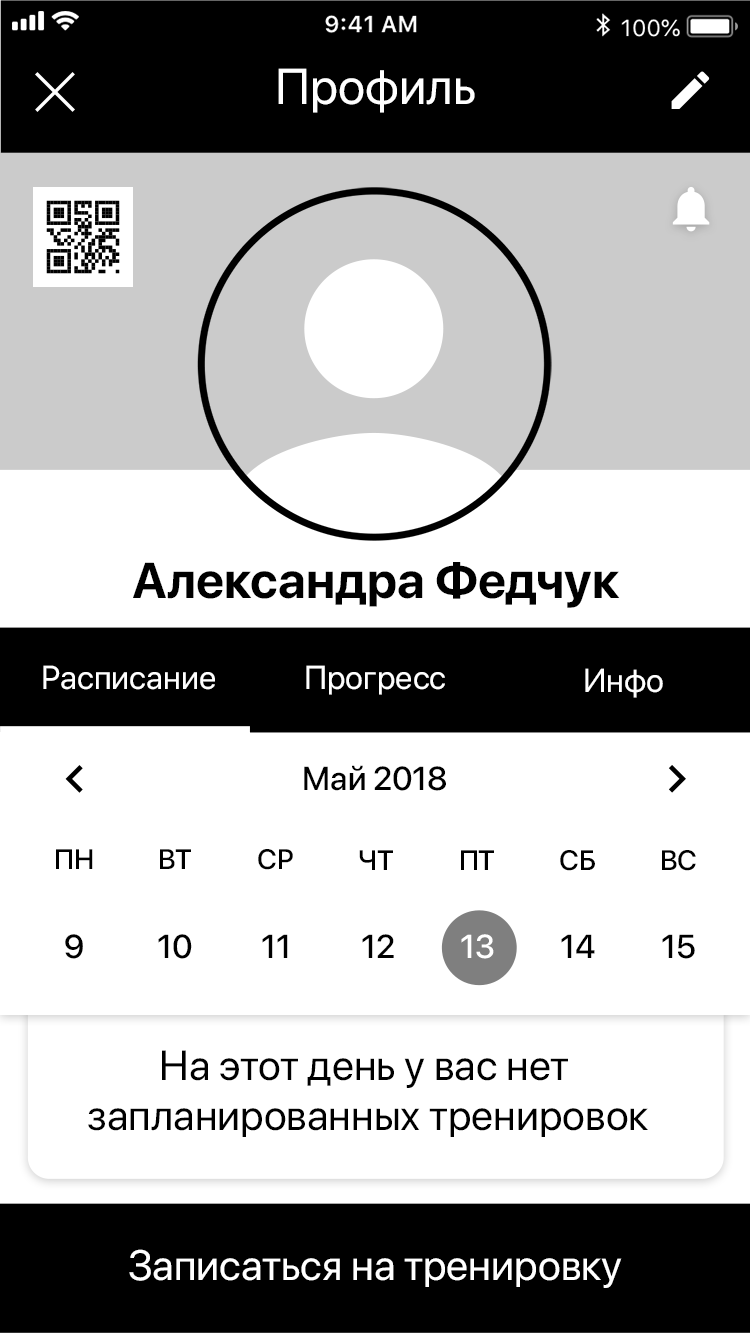
<style>
.page{position:relative;width:750px;height:1333px;background:#ffffff}
.page>*{position:absolute;margin:0}
.t1{font:50px "SFProDisplay-Regular";color:#ffffff}
.t2{font:50px "SFProDisplay-Bold";color:#000000}
.t3{font:33px "SFProDisplay-Regular";color:#ffffff}
.t4{font:33px "SFProDisplay-Medium";color:#000000}
.t5{font:28px "SFProDisplay-Medium";color:#000000}
.t6{font:33px "SFProDisplay-Medium";color:#ffffff}
.t7{font:42px "SFProDisplay-Regular";color:#000000}
.t8{font:42px "SFProDisplay-Regular";color:#ffffff}
</style>
<div class="page">
<p class="t1" style="left:278px;top:68px;width:197px;height:45px">Профиль</p>
<p class="t2" style="left:133px;top:562px;width:487px;height:46px">Александра Федчук</p>
<p class="t3" style="left:43px;top:665px;width:172px;height:25px">Расписание</p>
<p class="t3" style="left:306px;top:665px;width:139px;height:30px">Прогресс</p>
<p class="t3" style="left:585px;top:668px;width:78px;height:30px">Инфо</p>
<p class="t4" style="left:304px;top:765px;width:142px;height:26px">Май 2018</p>
<p class="t5" style="left:56px;top:849px;width:37px;height:20px">ПН</p>
<p class="t5" style="left:160px;top:849px;width:31px;height:20px">ВТ</p>
<p class="t5" style="left:258px;top:849px;width:35px;height:21px">СР</p>
<p class="t5" style="left:359px;top:850px;width:34px;height:20px">ЧТ</p>
<p class="t5" style="left:461px;top:850px;width:33px;height:20px">ПТ</p>
<p class="t5" style="left:560px;top:850px;width:35px;height:21px">СБ</p>
<p class="t5" style="left:662px;top:850px;width:34px;height:21px">ВС</p>
<p class="t4" style="left:65px;top:934px;width:18px;height:25px">9</p>
<p class="t4" style="left:158px;top:934px;width:34px;height:25px">10</p>
<p class="t4" style="left:262px;top:934px;width:26px;height:24px">11</p>
<p class="t4" style="left:362px;top:934px;width:32px;height:24px">12</p>
<p class="t6" style="left:461px;top:934px;width:33px;height:25px">13</p>
<p class="t4" style="left:561px;top:934px;width:34px;height:24px">14</p>
<p class="t4" style="left:662px;top:934px;width:33px;height:25px">15</p>
<p class="t7" style="left:88px;top:1050px;width:560px;height:87px;text-align:center">На этот день у вас нет <br>запланированных тренировок</p>
<p class="t8" style="left:129px;top:1249px;width:493px;height:39px">Записаться на тренировку</p>
</div>
